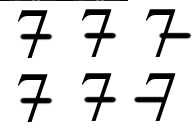
<style>
.page{position:relative;width:192px;height:128px;background:#ffffff}
.page>*{position:absolute;margin:0}
.t1{font:70.9px "TimesNewRomanPSMT";color:#000000}
</style>
<div class="page">
<p class="t1" style="left:17px;top:9px;width:31px;height:48px">7</p>
<p class="t1" style="left:81px;top:9px;width:31px;height:48px">7</p>
<p class="t1" style="left:145px;top:9px;width:31px;height:48px">7</p>
<p class="t1" style="left:17px;top:73px;width:31px;height:48px">7</p>
<p class="t1" style="left:81px;top:73px;width:31px;height:48px">7</p>
<p class="t1" style="left:145px;top:73px;width:31px;height:48px">7</p>
</div>
